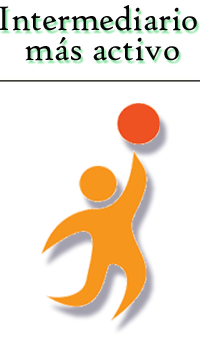
<style>
.page{position:relative;width:200px;height:350px;background:#ffffff}
.page>*{position:absolute;margin:0}
.t1{font:36.1px/30px "HighTowerText-Reg";color:#050505;scale:0.96 1}
</style>
<div class="page">
<p class="t1" style="left:0px;top:5px;width:197px;height:56px;text-align:center">Intermediario <br>más activo</p>
</div>
